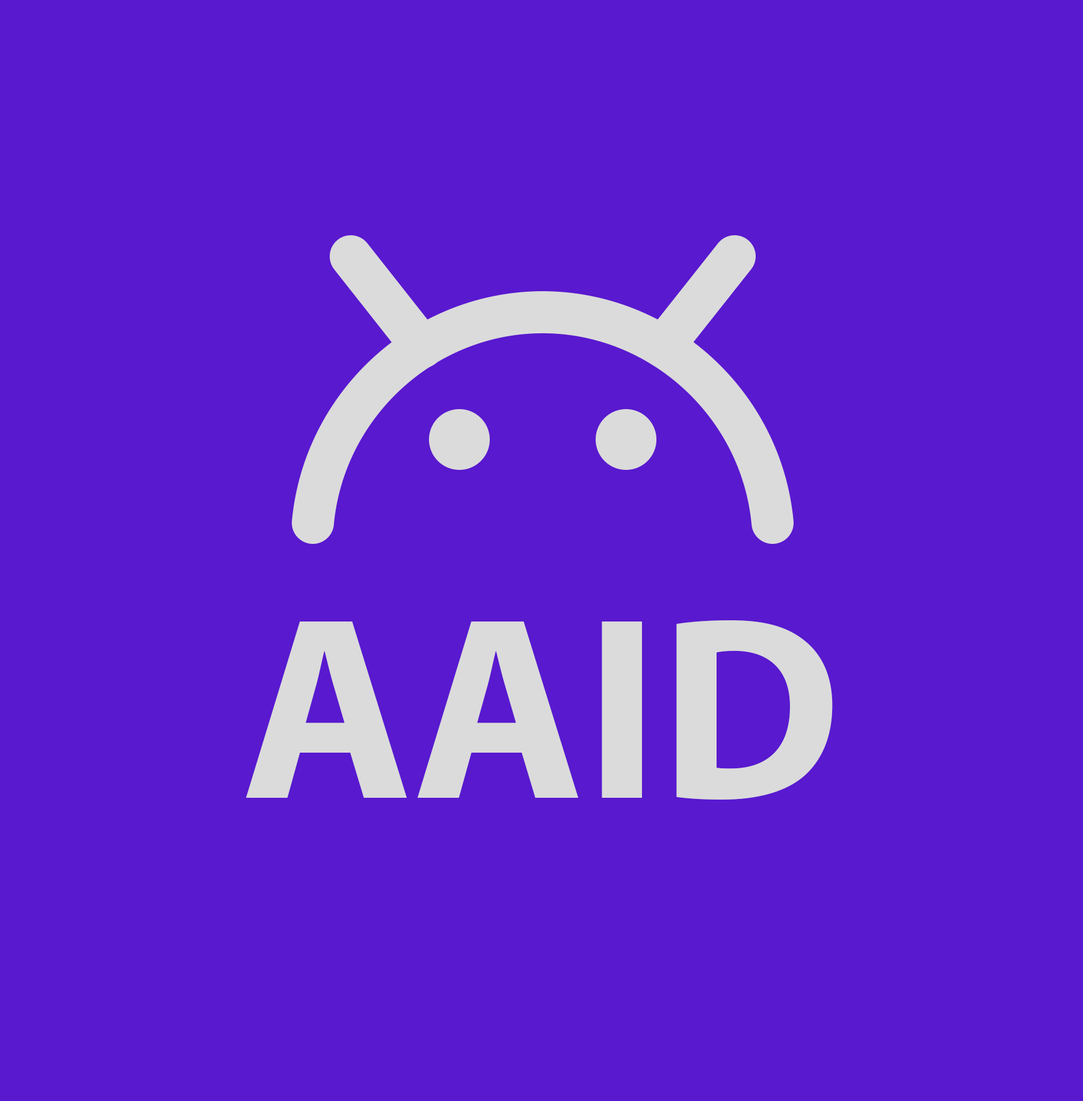
<style>
.page{position:relative;width:1083px;height:1101px;background:#5919cf}
.page>*{position:absolute;margin:0}
.t1{font:261.1px "MyriadPro-Bold";color:#dbdbdb}
</style>
<div class="page">
<p class="t1" style="left:246px;top:620px;width:587px;height:180px">AAID</p>
</div>
